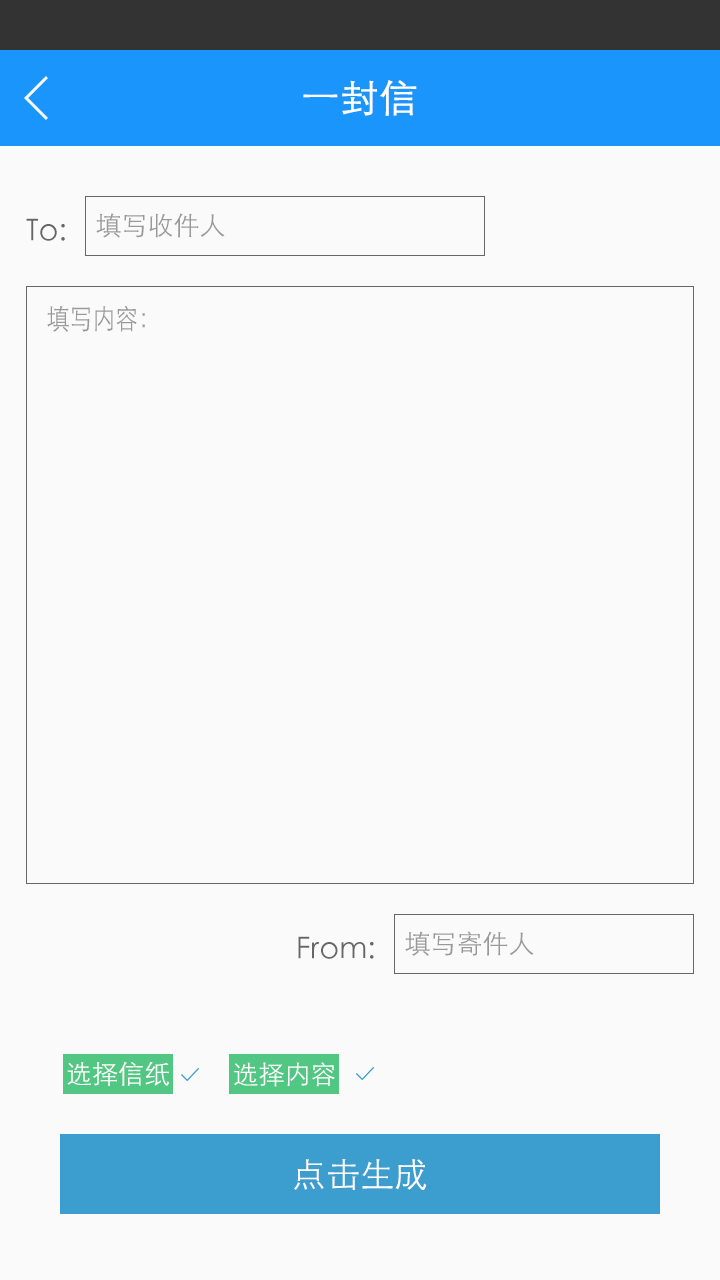
<style>
.page{position:relative;width:720px;height:1280px;background:#fafafa}
.page>*{position:absolute;margin:0}
.t1{font:38px "STXihei";color:#ffffff;font-weight:bold}
.t2{font:30px "STXihei";color:#666666}
.t3{font:26px "STXihei";color:#999999}
.t4{font:28px "STXihei";color:#999999;scale:0.82 1}
.t5{font:26px "STXihei";color:#ffffff}
.t6{font:34px "STXihei";color:#ffffff}
</style>
<div class="page">
<p class="t1" style="left:303px;top:80px;width:114px;height:36px">一封信</p>
<p class="t2" style="left:26px;top:218px;width:39px;height:23px">To:</p>
<p class="t3" style="left:96px;top:213px;width:129px;height:25px">填写收件人</p>
<p class="t4" style="left:47px;top:305px;width:98px;height:27px">填写内容：</p>
<p class="t2" style="left:298px;top:936px;width:76px;height:23px">From:</p>
<p class="t3" style="left:405px;top:931px;width:129px;height:25px">填写寄件人</p>
<p class="t5" style="left:67px;top:1061px;width:102px;height:25px">选择信纸</p>
<p class="t5" style="left:234px;top:1062px;width:101px;height:25px">选择内容</p>
<p class="t6" style="left:294px;top:1159px;width:133px;height:31px">点击生成</p>
</div>
